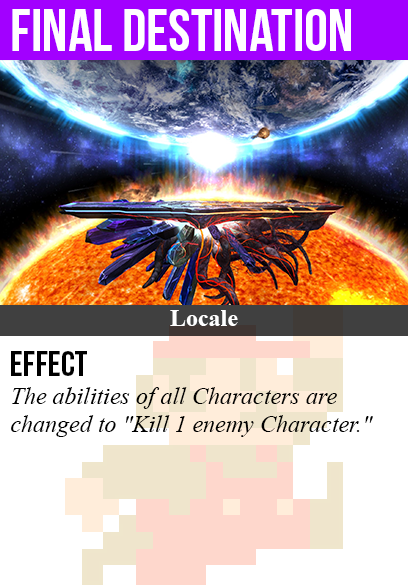
<style>
.page{position:relative;width:408px;height:585px;background:#ffffff}
.page>*{position:absolute;margin:0}
.t1{font:60px "BebasNeue";color:#ffffff}
.t2{font:24px "TimesNewRomanPS-BoldMT";color:#ffffff}
.t3{font:36px "BebasNeue";color:#000000}
.t4{font:24px "TimesNewRomanPS-ItalicMT";color:#000000}
</style>
<div class="page">
<p class="t1" style="left:12px;top:9px;width:339px;height:42px">final destination</p>
<p class="t2" style="left:170px;top:310px;width:68px;height:16px">Locale</p>
<p class="t3" style="left:11px;top:351px;width:76px;height:25px">Effect</p>
<p class="t4" style="left:11px;top:387px;width:362px;height:50px">The abilities of all Characters are<br>changed to "Kill 1 enemy Character."</p>
</div>
